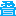
<style>
.page{position:relative;width:16px;height:16px;background:#03a9f4}
.page>*{position:absolute;margin:0}
.t1{font:15.9px "MicrosoftYaHei-Bold";letter-spacing:0.085em;color:#03a9f4}
</style>
<div class="page">
<p class="t1" style="left:0px;top:1px;width:16px;height:14px;opacity:0.34">叠</p>
</div>
